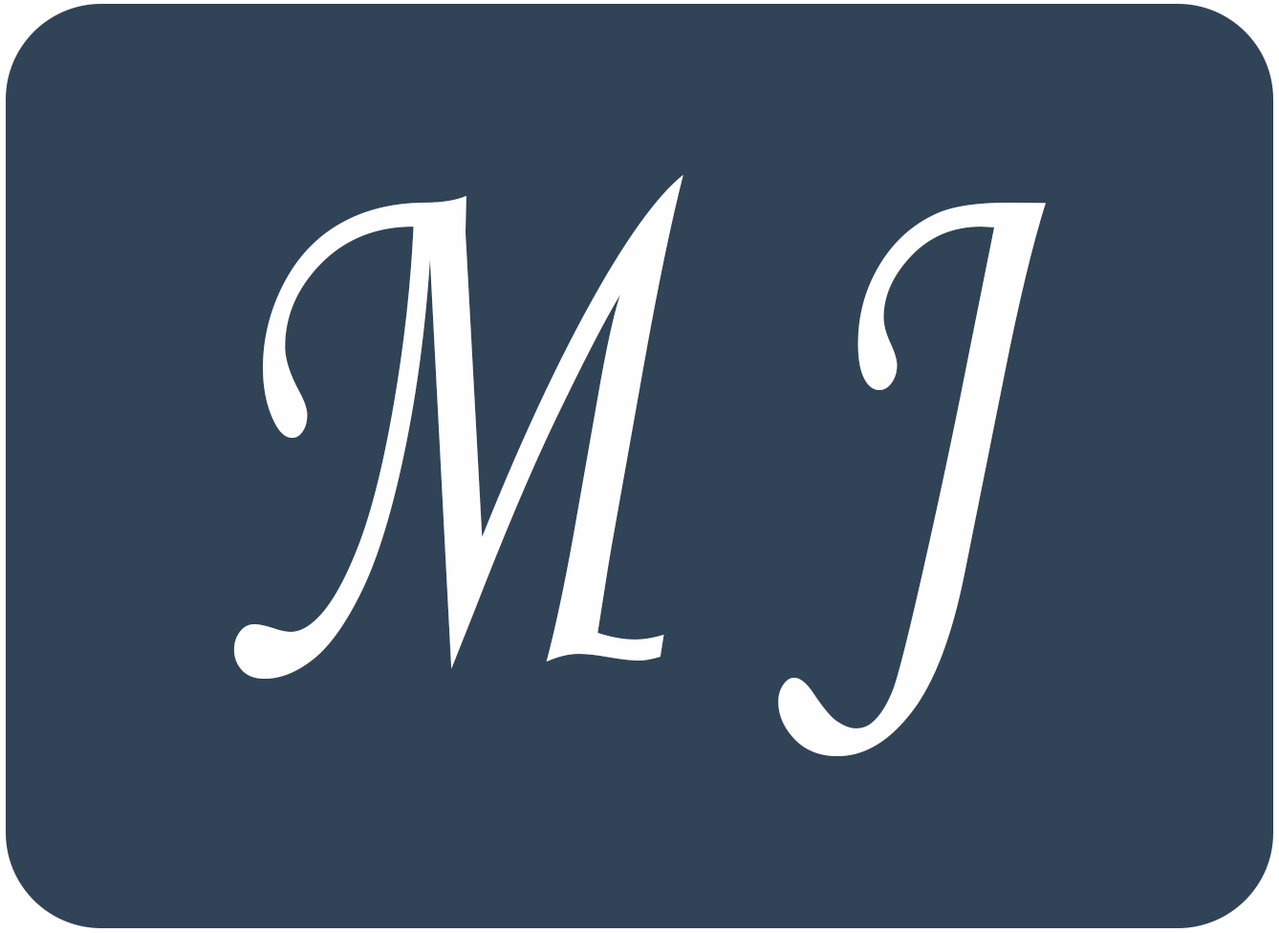
<style>
.page{position:relative;width:1279px;height:933px;background:#304357}
.page>*{position:absolute;margin:0}
.t1{font:779.1px "MonotypeCorsiva";color:#fffefe;scale:0.7 1}
</style>
<div class="page">
<p class="t1" style="left:233px;top:175px;width:812px;height:581px">M J</p>
</div>
